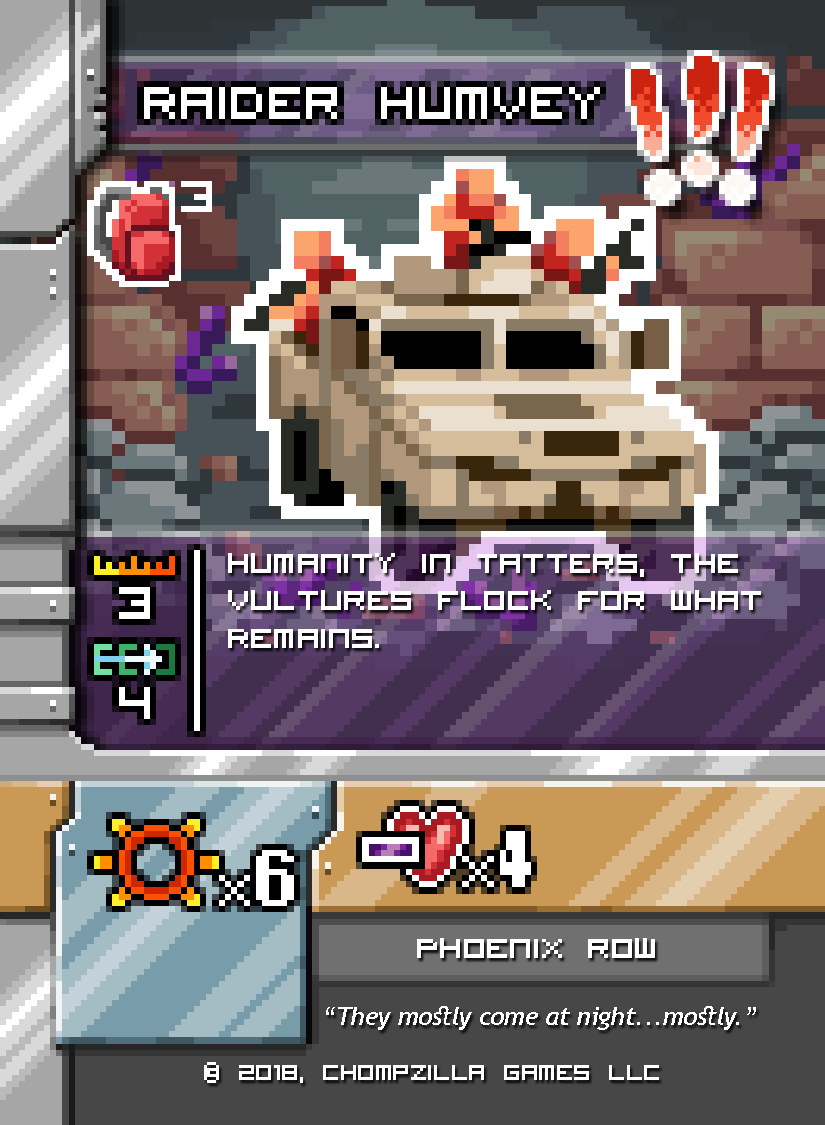
<style>
.page{position:relative;width:825px;height:1125px}
.page>*{position:absolute;margin:0}
.t1{font:50px/37.5px "VisitorTT2BRK";color:#ffffff}
.t2{font:50px "VisitorTT2BRK";color:#ffffff}
.t3{font:25px "TrebuchetMS-Italic";color:#ffffff}
.t4{font:37.5px "VisitorTT2BRK";color:#ffffff}
</style>
<div class="page">
<p class="t1" style="left:228px;top:553px;width:533px;height:95px">Humanity in tatters, the <br>vultures flock for what<br>Remains.</p>
<p class="t2" style="left:417px;top:938px;width:238px;height:20px">Phoenix row</p>
<p class="t3" style="left:326px;top:1006px;width:430px;height:24px">“They mostly come at night...mostly.”</p>
<p class="t4" style="left:204px;top:1062px;width:455px;height:21px">© 2018, Chompzilla Games LLC</p>
</div>
